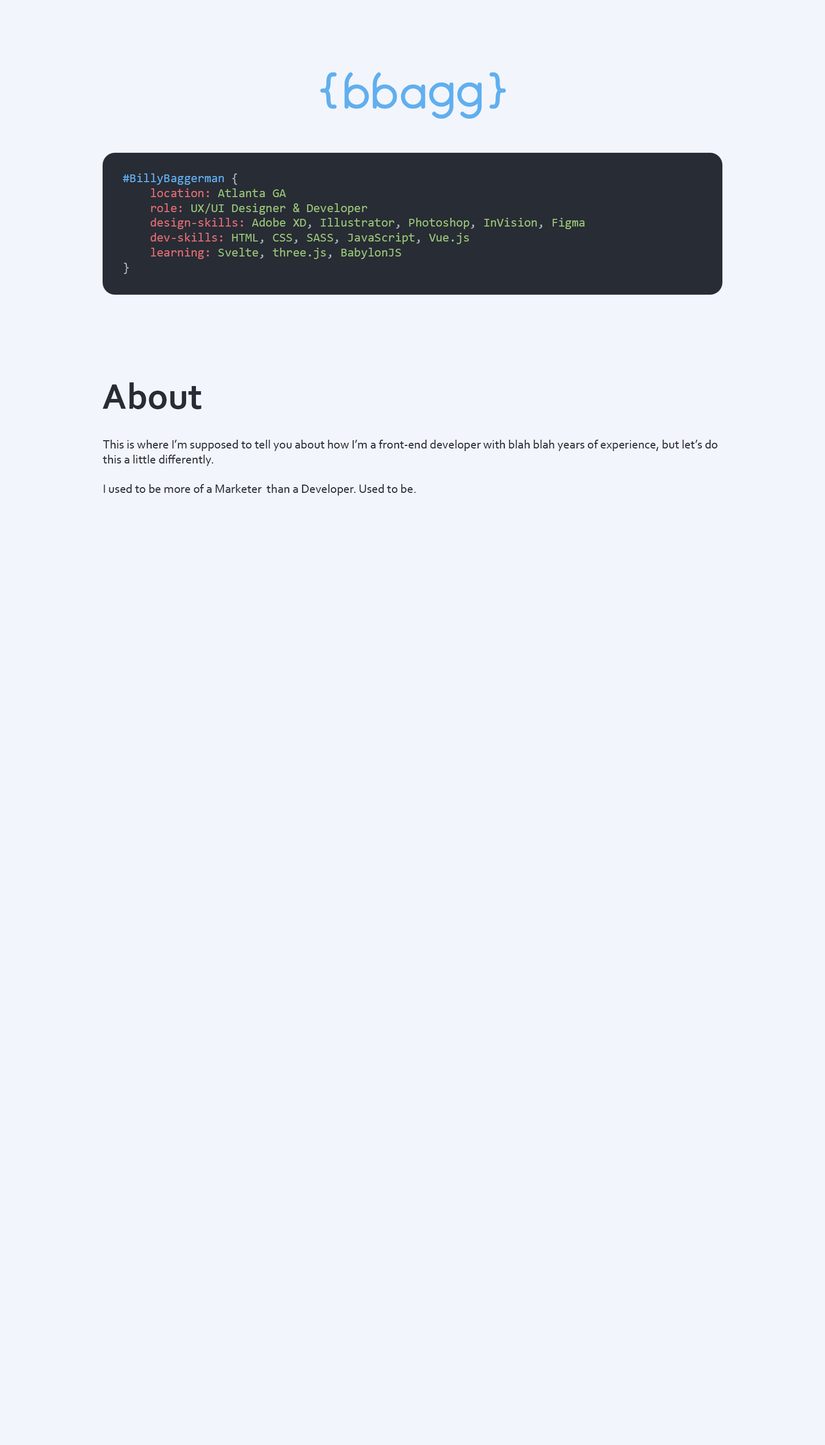
<style>
.page{position:relative;width:825px;height:1445px;background:#f2f5fb}
.page>*{position:absolute;margin:0}
.t1{font:12.4px "Consolas";color:#61afef}
.t2{font:12.4px "Consolas";color:#e06c75}
.t3{font:12.4px "Consolas";color:#abb2bf}
.t4{font:12.4px "Consolas";color:#98c379}
.t5{font:37.1px "Corbel-Bold";color:#282c34}
.t6{font:12.4px "Corbel";color:#282c34}
</style>
<div class="page">
<p class="t1" style="left:123px;top:173px;width:101px;height:12px">#BillyBaggerman</p>
<p class="t2" style="left:151px;top:188px;width:92px;height:71px"><span class="t3"><br>    </span>location:<br>    role:<br>    design-skills:<br>    dev-skills:<br>    learning:</p>
<p class="t4" style="left:191px;top:188px;width:394px;height:71px"><span class="t3"><br></span>              Atlanta GA<br>          UX/UI Designer &amp; Developer<br>                   Adobe XD<span class="t3">,</span> Illustrator<span class="t3">,</span> Photoshop<span class="t3">,</span> InVision<span class="t3">,</span> Figma<br>                HTML<span class="t3">,</span> CSS<span class="t3">,</span> SASS<span class="t3">,</span> JavaScript<span class="t3">,</span> Vue.js<br>              Svelte<span class="t3">,</span> three.js<span class="t3">,</span> BabylonJS</p>
<p class="t5" style="left:103px;top:382px;width:99px;height:27px">About</p>
<p class="t6" style="left:103px;top:440px;width:615px;height:55px">This is where I’m supposed to tell you about how I’m a front-end developer with blah blah years of experience, but let’s do <br>this a little differently.<br><br>I used to be more of a Marketer  than a Developer. Used to be.</p>
</div>
